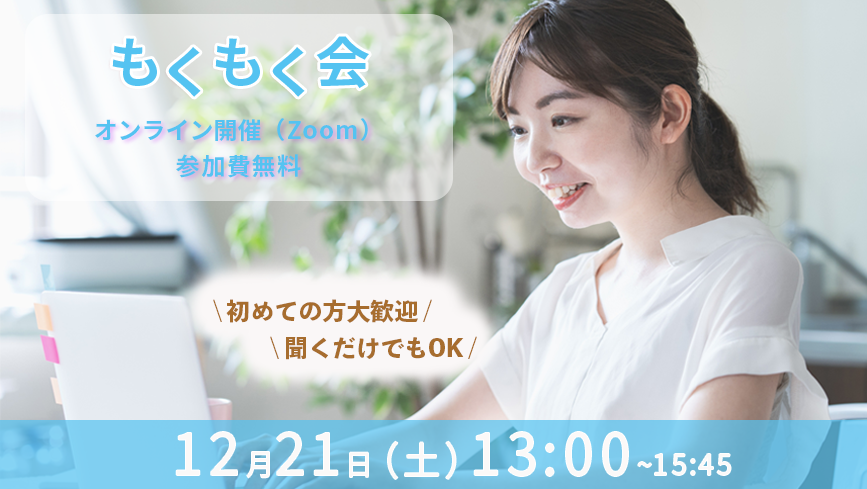
<style>
.page{position:relative;width:867px;height:489px}
.page>*{position:absolute;margin:0}
.t1{font:55px "SourceHanSans-Bold";color:#54c3f1}
.t2{font:24px/36px "SourceHanSans-Bold";letter-spacing:0.05em;color:#54c3f1}
.t3{font:24px/36px "SourceHanSans-Bold";color:#54c3f1}
.t4{font:24px "Toppan-BunkyuMidashiGoStdN-EB";color:#a76d2e}
.t5{font:29.4px "SourceHanSans-Regular";letter-spacing:0.1em;color:#fbf9f8;scale:0.95 1}
.t6{font:58.7px "SourceHanSans-Regular";letter-spacing:0.1em;color:#fbf9f8;scale:0.95 1}
.t7{font:39.2px "SourceHanSans-Regular";letter-spacing:0.1em;color:#fbf9f8;scale:0.95 1}
</style>
<div class="page">
<p class="t1" style="left:112px;top:38px;width:45px;height:48px">も</p>
<p class="t1" style="left:215px;top:38px;width:45px;height:48px">も</p>
<p class="t1" style="left:316px;top:36px;width:53px;height:53px">会</p>
<p class="t1" style="left:168px;top:47px;width:33px;height:50px">く</p>
<p class="t1" style="left:272px;top:47px;width:33px;height:50px">く</p>
<p class="t2" style="left:95px;top:118px;width:273px;height:60px;text-align:center"><span class="t3">オンライン開催</span>（Zoom）<br>参加費無料</p>
<p class="t4" style="left:213px;top:299px;width:219px;height:24px">\ 初めての方大歓迎 /</p>
<p class="t4" style="left:270px;top:336px;width:207px;height:24px">\ 聞くだけでもOK /</p>
<p class="t5" style="left:176px;top:432px;width:555px;height:47px"><span class="t6">12</span>月<span class="t6">21</span>日<span class="t7">（土）</span><span class="t6">13:00</span>~15:45</p>
</div>
